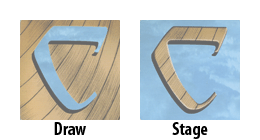
<style>
.page{position:relative;width:260px;height:140px;background:#ffffff}
.page>*{position:absolute;margin:0}
.t1{font:18px "MyriadPro-BoldCond";color:#000000}
</style>
<div class="page">
<p class="t1" style="left:54px;top:122px;width:32px;height:13px">Draw</p>
<p class="t1" style="left:172px;top:122px;width:36px;height:17px">Stage</p>
</div>
